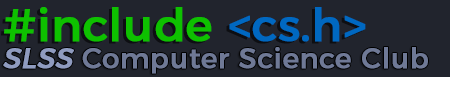
<style>
.page{position:relative;width:450px;height:96px;background:#21242d}
.page>*{position:absolute;margin:0}
.t1{font:45px "Montserrat-Regular";color:#0ec100;font-weight:bold}
.t2{font:45px "Montserrat-Regular";color:#0068c1;font-weight:bold}
.t3{font:28px "Montserrat-Regular";color:#6f7996;font-weight:bold}
.t4{font:28px "Montserrat-Regular";color:#8f9bbf;font-weight:bold;font-style:italic}
</style>
<div class="page">
<p class="t1" style="left:4px;top:7px;width:362px;height:35px">#include <span class="t2">&lt;cs.h&gt;</span></p>
<p class="t3" style="left:3px;top:47px;width:425px;height:27px"><span class="t4">SLSS </span>Computer Science Club</p>
</div>
